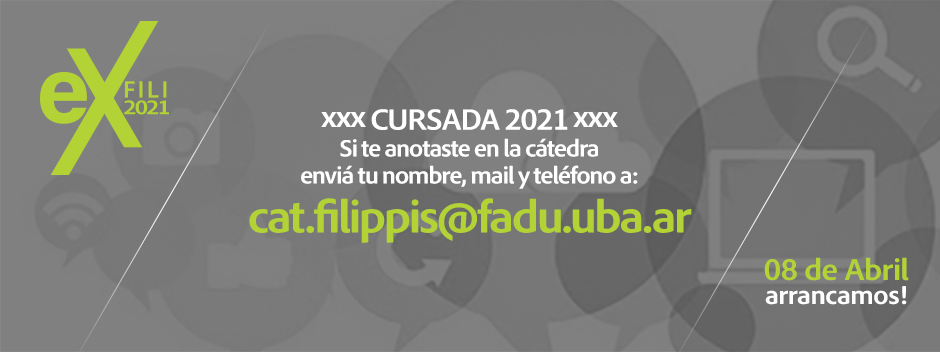
<style>
.page{position:relative;width:940px;height:352px;background:#808080}
.page>*{position:absolute;margin:0}
.t1{font:24.6px/26.8px "AdobeClean-BoldSemiCn";letter-spacing:-0.05em;color:#ffffff;scale:1.09 1}
.t2{font:30.8px/26.8px "AdobeClean-BoldSemiCn";letter-spacing:-0.05em;color:#ffffff;scale:1.09 1}
.t3{font:47.2px/49.1px "AdobeClean-BoldSemiCn";letter-spacing:-0.05em;color:#b2d235;scale:1.09 1}
.t4{font:31.3px/24px "AdobeClean-BoldSemiCn";letter-spacing:-0.025em;color:#b2d235;scale:1.09 1}
.t5{font:26.7px/24px "AdobeClean-BoldSemiCn";letter-spacing:-0.025em;color:#fefefe;scale:1.09 1}
</style>
<div class="page">
<p class="t1" style="left:249px;top:109px;width:443px;height:134px;text-align:center"><span class="t2">xxx CURSADA 2021 xxx<br></span>Si te anotaste en la cátedra<br>enviá tu nombre, mail y teléfono a:<br><span class="t3">cat.filippis@fadu.uba.ar</span></p>
<p class="t4" style="left:764px;top:257px;width:145px;height:48px;text-align:center">08 de Abril<br><span class="t5">arrancamos!</span></p>
</div>
